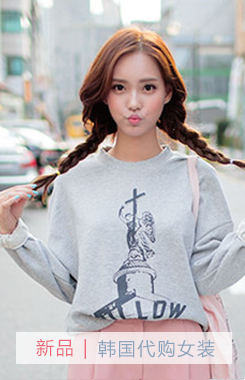
<style>
.page{position:relative;width:245px;height:380px}
.page>*{position:absolute;margin:0}
.t1{font:18px "MicrosoftYaHei";letter-spacing:0.1em;color:#ec6c7a}
.t2{font:18px "MicrosoftYaHei";letter-spacing:0.1em;color:#8ca4bc}
</style>
<div class="page">
<p class="t1" style="left:36px;top:339px;width:50px;height:20px">新品 |</p>
<p class="t2" style="left:98px;top:339px;width:117px;height:19px">韩国代购女装</p>
</div>
